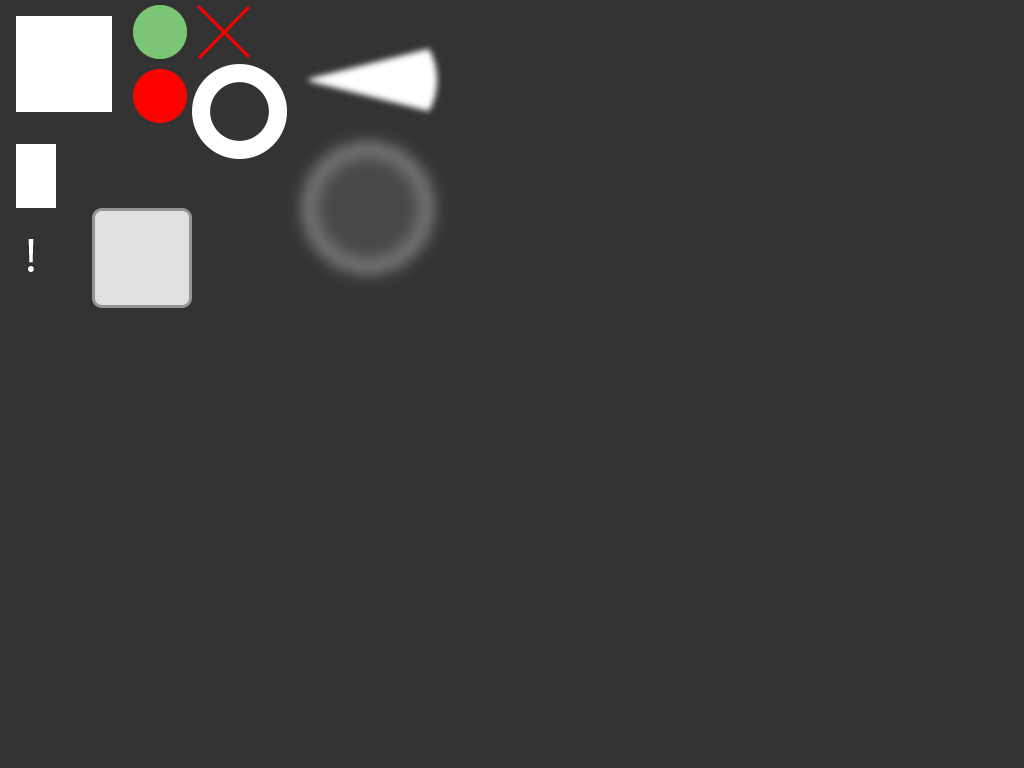
<style>
.page{position:relative;width:1024px;height:768px;background:#333333}
.page>*{position:absolute;margin:0}
.t1{font:48px "MyriadPro-Regular";color:#ffffff}
</style>
<div class="page">
<p class="t1" style="left:28px;top:239px;width:6px;height:33px">!</p>
</div>
